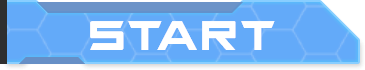
<style>
.page{position:relative;width:365px;height:70px;background:#63aaf9}
.page>*{position:absolute;margin:0}
.t1{font:45.3px "QORE";color:#ffffff}
</style>
<div class="page">
<p class="t1" style="left:90px;top:21px;width:185px;height:29px">START</p>
</div>
